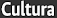
<style>
.page{position:relative;width:57px;height:18px;background:#333333}
.page>*{position:absolute;margin:0}
.t1{font:21.2px "AncizarSans-Bold";color:#fcfcfc;scale:0.84 1}
</style>
<div class="page">
<p class="t1" style="left:1px;top:0px;width:53px;height:16px">Cultura</p>
</div>
